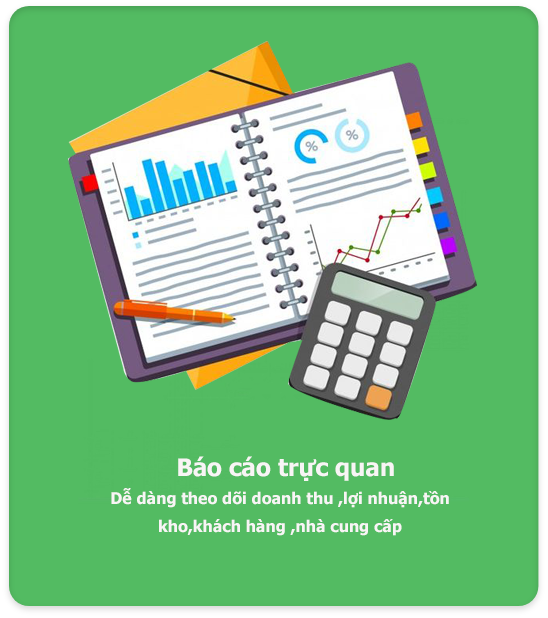
<style>
.page{position:relative;width:548px;height:618px;background:#53bb62}
.page>*{position:absolute;margin:0}
.t1{font:16px/28px "Tahoma-Bold";color:#f8f5f5}
.t2{font:20px/28px "Tahoma-Bold";color:#f8f5f5}
.t3{font:24px/28px "Tahoma-Bold";color:#f8f5f5}
</style>
<div class="page">
<p class="t1" style="left:111px;top:456px;width:338px;height:80px;text-align:center"><span class="t2">  </span><span class="t3">Báo cáo trực quan<br></span>Dễ dàng theo dõi doanh thu ,lợi nhuận,tồn kho,khách hàng ,nhà cung cấp</p>
</div>
